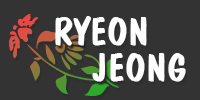
<style>
.page{position:relative;width:200px;height:100px;background:#333333}
.page>*{position:absolute;margin:0}
.t1{font:38.4px/36px "DomCasual-BT";color:#fffefe;font-weight:bold}
</style>
<div class="page">
<p class="t1" style="left:55px;top:16px;width:131px;height:66px">RYEON<br>    JEONG</p>
</div>
